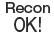
<style>
.page{position:relative;width:54px;height:36px;background:#ffffff}
.page>*{position:absolute;margin:0}
.t1{font:13px/14px "GothicMB101Pro-Medium";color:#2a2a2a}
.t2{font:18px/14px "GothicMB101Pro-Medium";letter-spacing:-0.04em;color:#2a2a2a;scale:0.8 1}
</style>
<div class="page">
<p class="t1" style="left:6px;top:2px;width:44px;height:30px;text-align:center">Recon<br><span class="t2">OK!</span></p>
</div>
